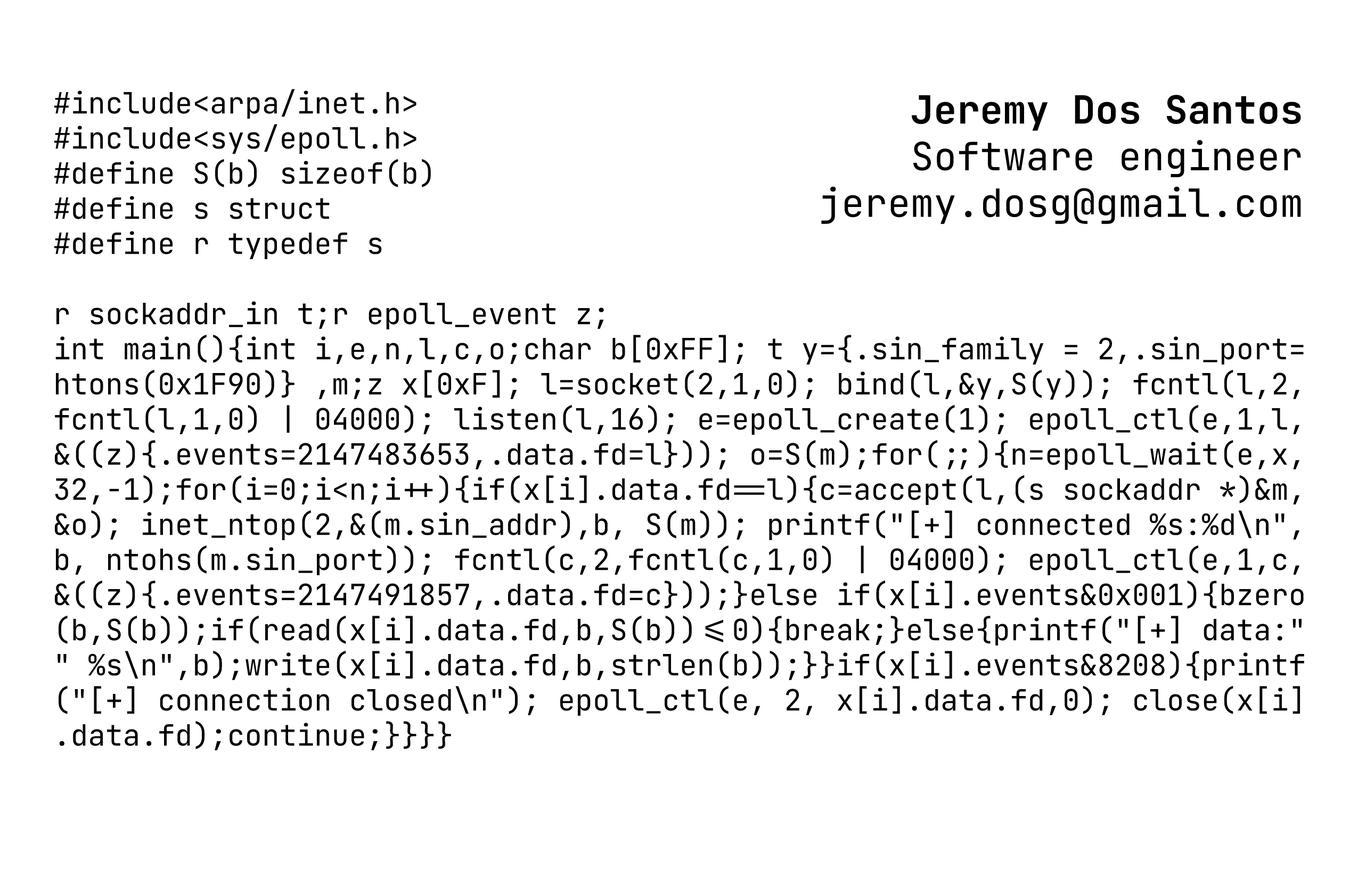
<style>
.page{position:relative;width:1358px;height:878px;background:#ffffff}
.page>*{position:absolute;margin:0}
.t1{font:29.3px "JetBrainsMono-Regular";color:#000000}
.t2{font:38.9px "JetBrainsMono-Regular";color:#000000}
.t3{font:38.9px "JetBrainsMono-Bold";color:#000000}
</style>
<div class="page">
<p class="t1" style="left:54px;top:89px;width:1250px;height:662px">#include&lt;arpa/inet.h&gt;<br>#include&lt;sys/epoll.h&gt;<br>#define S(b) sizeof(b)<br>#define s struct<br>#define r typedef s<br><br>r sockaddr_in t;r epoll_event z;<br>int main(){int i,e,n,l,c,o;char b[0xFF]; t y={.sin_family = 2,.sin_port=<br>htons(0x1F90)} ,m;z x[0xF]; l=socket(2,1,0); bind(l,&amp;y,S(y)); fcntl(l,2,<br>fcntl(l,1,0) | 04000); listen(l,16); e=epoll_create(1); epoll_ctl(e,1,l,<br>&amp;((z){.events=2147483653,.data.fd=l})); o=S(m);for(;;){n=epoll_wait(e,x,<br>32,-1);for(i=0;i&lt;n;i++){if(x[i].data.fd==l){c=accept(l,(s sockaddr *)&amp;m,<br>&amp;o); inet_ntop(2,&amp;(m.sin_addr),b, S(m)); printf("[+] connected %s:%d\n",<br>b, ntohs(m.sin_port)); fcntl(c,2,fcntl(c,1,0) | 04000); epoll_ctl(e,1,c,<br>&amp;((z){.events=2147491857,.data.fd=c}));}else if(x[i].events&amp;0x001){bzero<br>(b,S(b));if(read(x[i].data.fd,b,S(b))&lt;=0){break;}else{printf("[+] data:"<br>" %s\n",b);write(x[i].data.fd,b,strlen(b));}}if(x[i].events&amp;8208){printf<br>("[+] connection closed\n"); epoll_ctl(e, 2, x[i].data.fd,0); close(x[i]<br>.data.fd);continue;}}}}</p>
<p class="t2" style="left:821px;top:95px;width:480px;height:129px;text-align:right"><span class="t3">Jeremy Dos Santos<br></span>Software engineer<br>jeremy.dosg@gmail.com</p>
</div>
